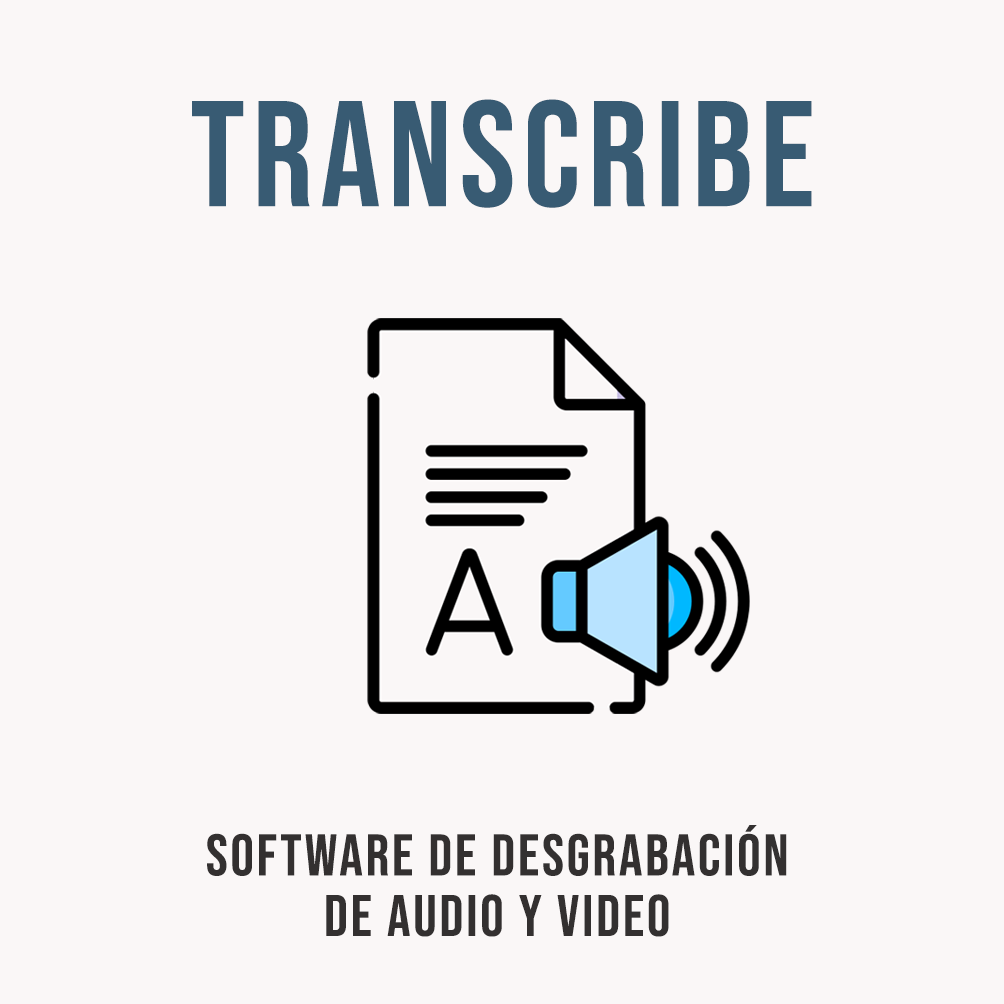
<style>
.page{position:relative;width:1004px;height:1004px;background:#faf7f7}
.page>*{position:absolute;margin:0}
.t1{font:150px "BebasNeue-Regular";letter-spacing:0.05em;color:#385b73}
.t2{font:58.3px/60.6px "BebasNeue-Regular";letter-spacing:0.05em;color:#333030}
</style>
<div class="page">
<p class="t1" style="left:192px;top:99px;width:620px;height:109px">transcribe</p>
<p class="t2" style="left:207px;top:825px;width:580px;height:112px;text-align:center">software de desgrabación<br>de audio y video</p>
</div>
